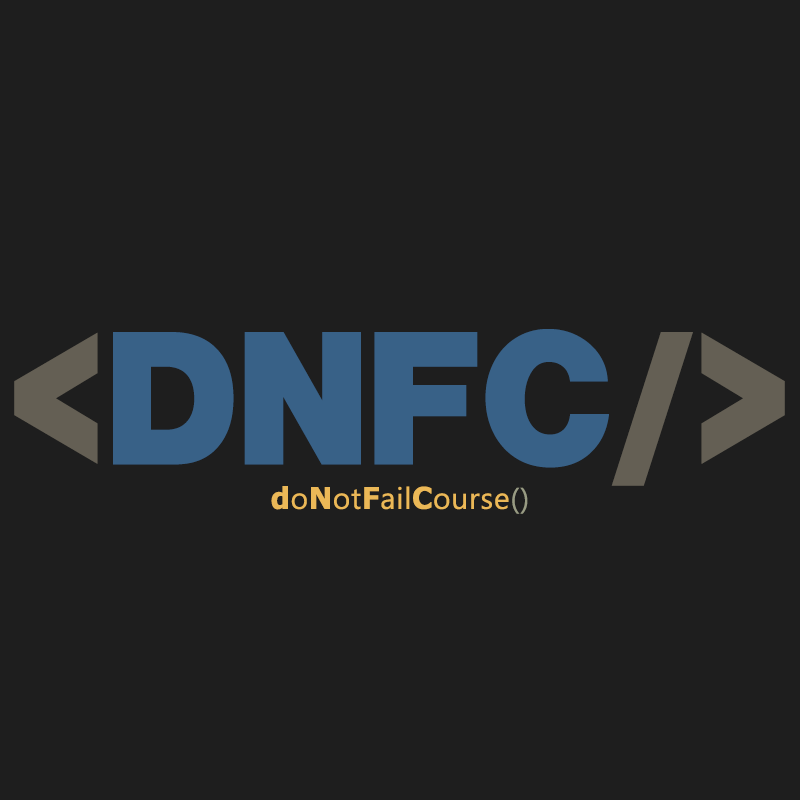
<style>
.page{position:relative;width:800px;height:800px;background:#1e1e1e}
.page>*{position:absolute;margin:0}
.t1{font:198.4px "NimbusSansBeckerPBla";letter-spacing:0.025em;color:#386187;scale:0.97 1}
.t2{font:198.4px "NimbusSansBeckerPBla";letter-spacing:0.025em;color:#645f54;scale:0.97 1}
.t3{font:30px "SegoeUIHistoric";letter-spacing:0.025em;color:#ebb857}
.t4{font:30px "Tahoma-Bold";letter-spacing:0.025em;color:#ebb857}
.t5{font:30px "SegoeUIHistoric";letter-spacing:0.025em;color:#989b83}
</style>
<div class="page">
<p class="t1" style="left:14px;top:329px;width:771px;height:157px"><span class="t2">&lt;</span>DNFC<span class="t2">/&gt;</span></p>
<p class="t3" style="left:271px;top:486px;width:257px;height:28px"><span class="t4">d</span>o<span class="t4">N</span>ot<span class="t4">F</span>ail<span class="t4">C</span>ourse<span class="t5">()</span></p>
</div>
